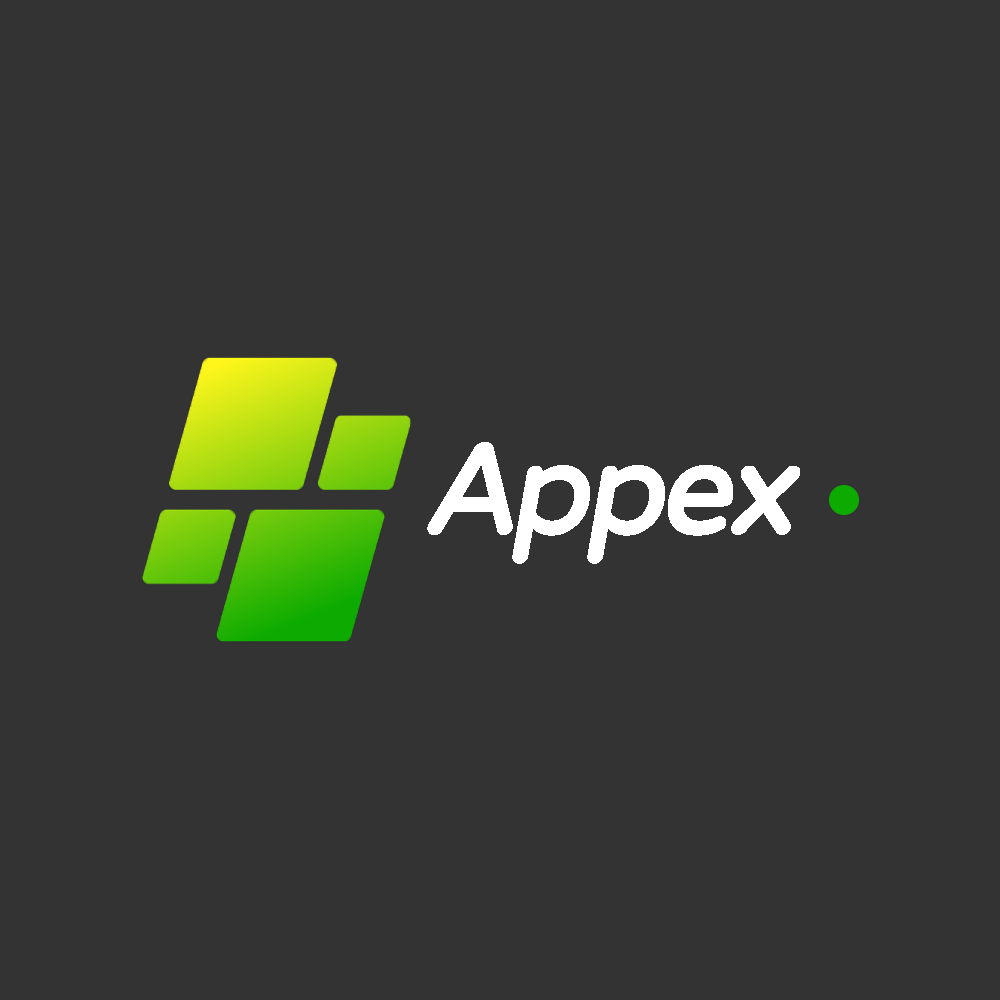
<style>
.page{position:relative;width:1000px;height:1000px;background:#333333}
.page>*{position:absolute;margin:0}
.t1{font:125px "VarelaRound-Regular";letter-spacing:-0.06em;color:#ffffff;font-weight:bold;font-style:italic}
</style>
<div class="page">
<p class="t1" style="left:427px;top:442px;width:373px;height:122px">Appex</p>
</div>
